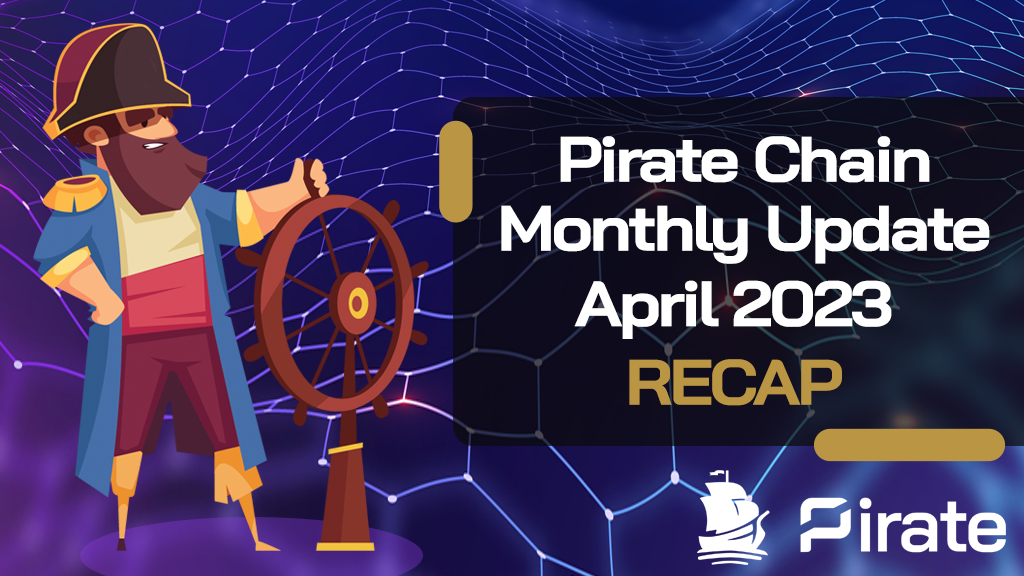
<style>
.page{position:relative;width:1024px;height:576px}
.page>*{position:absolute;margin:0}
.t1{font:63.9px "BaiJamjuree-Bold";letter-spacing:-0.05em;color:#ffffff;scale:1.1 1}
.t2{font:63.9px "BaiJamjuree-Bold";letter-spacing:-0.05em;color:#ba9544;text-transform:uppercase;scale:1.1 1}
</style>
<div class="page">
<p class="t1" style="left:560px;top:136px;width:370px;height:47px">Pirate Chain</p>
<p class="t1" style="left:501px;top:205px;width:489px;height:59px">Monthly Update</p>
<p class="t1" style="left:574px;top:280px;width:318px;height:59px">April 2023</p>
<p class="t2" style="left:629px;top:359px;width:213px;height:47px">recap</p>
</div>
